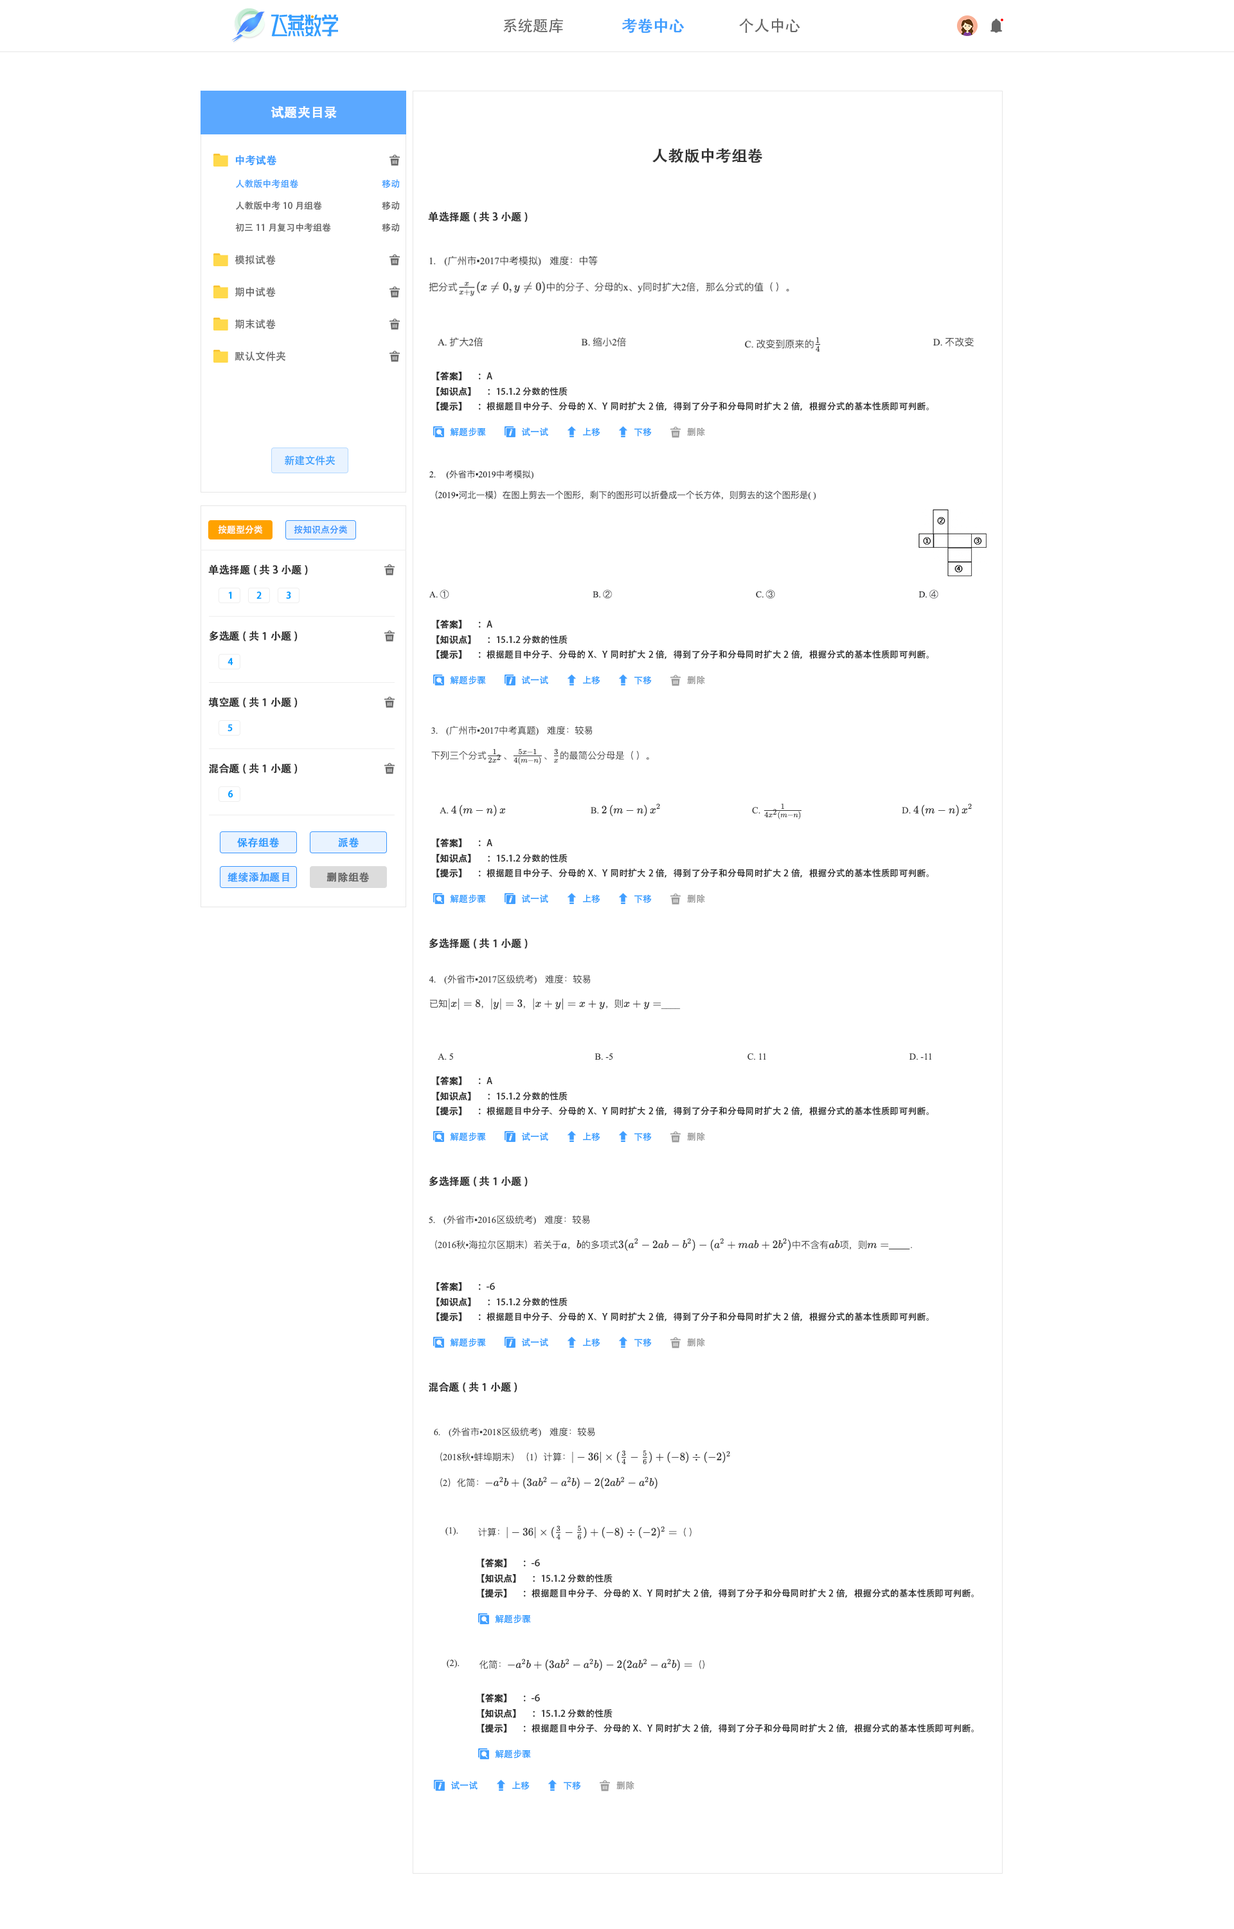
<style>
.page{position:relative;width:1234px;height:1929px;background:#ffffff}
.page>*{position:absolute;margin:0}
.t1{font:15.4px "AdobeHeitiStd-Regular";color:#666666}
.t2{font:15.4px "AdobeHeitiStd-Regular";color:#409eff;font-weight:bold}
.t3{font:12.9px "AdobeHeitiStd-Regular";color:#ffffff;font-weight:bold}
.t4{font:15.4px "AdobeHeitiStd-Regular";color:#333333;font-weight:bold}
.t5{font:10.3px "AdobeHeitiStd-Regular";color:#409eff;font-weight:bold}
.t6{font:9px "AdobeHeitiStd-Regular";color:#409eff}
.t7{font:9px "AdobeHeitiStd-Regular";color:#666666}
.t8{font:10.3px "AdobeHeitiStd-Regular";color:#333333;font-weight:bold}
.t9{font:10.3px "AdobeHeitiStd-Regular";color:#666666}
.t10{font:9px "AdobeHeitiStd-Regular";color:#2e2e2e;font-weight:bold}
.t11{font:9px "AdobeHeitiStd-Regular";color:#2e2e2e}
.t12{font:9px "AdobeHeitiStd-Regular";color:#339dff}
.t13{font:9px "AdobeHeitiStd-Regular";color:#999999}
.t14{font:10.3px "AdobeHeitiStd-Regular";color:#339dff}
.t15{font:9px "AdobeHeitiStd-Regular";color:#ffffff}
.t16{font:9px "AdobeHeitiStd-Regular";color:#3794ff}
.t17{font:9px "AdobeHeitiStd-Regular";color:#049eff;font-weight:bold}
.t18{font:10.3px "AdobeHeitiStd-Regular";color:#339dff;font-weight:bold}
.t19{font:10.3px "AdobeHeitiStd-Regular";color:#666666;font-weight:bold}
</style>
<div class="page">
<p class="t1" style="left:503px;top:19px;width:60px;height:14px">系统题库</p>
<p class="t2" style="left:622px;top:18px;width:63px;height:15px">考卷中心</p>
<p class="t1" style="left:739px;top:18px;width:61px;height:15px">个人中心</p>
<p class="t3" style="left:271px;top:106px;width:66px;height:13px">试题夹目录</p>
<p class="t4" style="left:652px;top:148px;width:110px;height:15px">人教版中考组卷</p>
<p class="t5" style="left:235px;top:155px;width:42px;height:11px">中考试卷</p>
<p class="t6" style="left:236px;top:179px;width:62px;height:9px">人教版中考组卷</p>
<p class="t6" style="left:382px;top:179px;width:18px;height:9px">移动</p>
<p class="t7" style="left:236px;top:201px;width:86px;height:9px">人教版中考10月组卷</p>
<p class="t7" style="left:382px;top:201px;width:18px;height:9px">移动</p>
<p class="t8" style="left:428px;top:212px;width:100px;height:10px">单选择题(共3小题)</p>
<p class="t7" style="left:235px;top:223px;width:96px;height:9px">初三11月复习中考组卷</p>
<p class="t7" style="left:382px;top:223px;width:18px;height:9px">移动</p>
<p class="t9" style="left:235px;top:255px;width:41px;height:10px">模拟试卷</p>
<p class="t9" style="left:235px;top:287px;width:41px;height:10px">期中试卷</p>
<p class="t9" style="left:235px;top:319px;width:41px;height:10px">期末试卷</p>
<p class="t9" style="left:235px;top:351px;width:50px;height:10px">默认文件夹</p>
<p class="t10" style="left:437px;top:372px;width:55px;height:9px">【答案】 <span class="t11">     ：A</span></p>
<p class="t11" style="left:437px;top:387px;width:131px;height:9px"><span class="t10">【知识点】 </span>     ：15.1.2 分数的性质</p>
<p class="t11" style="left:437px;top:401px;width:492px;height:10px"><span class="t10">【提示】 </span>     ：根据题目中分子、分母的X、Y同时扩大2倍，得到了分子和分母同时扩大2倍，根据分式的基本性质即可判断。</p>
<p class="t12" style="left:450px;top:428px;width:36px;height:9px">解题步骤</p>
<p class="t12" style="left:522px;top:428px;width:26px;height:8px">试一试</p>
<p class="t12" style="left:583px;top:428px;width:17px;height:9px">上移</p>
<p class="t12" style="left:634px;top:428px;width:18px;height:9px">下移</p>
<p class="t13" style="left:687px;top:428px;width:18px;height:8px">删除</p>
<p class="t14" style="left:284px;top:455px;width:51px;height:10px">新建文件夹</p>
<p class="t15" style="left:218px;top:525px;width:44px;height:9px">按题型分类</p>
<p class="t16" style="left:294px;top:525px;width:53px;height:9px">按知识点分类</p>
<p class="t8" style="left:208px;top:564px;width:100px;height:11px">单选择题(共3小题)</p>
<p class="t17" style="left:228px;top:591px;width:4px;height:8px">1</p>
<p class="t17" style="left:256px;top:591px;width:6px;height:8px">2</p>
<p class="t17" style="left:286px;top:591px;width:5px;height:8px">3</p>
<p class="t10" style="left:437px;top:620px;width:55px;height:9px">【答案】 <span class="t11">     ：A</span></p>
<p class="t8" style="left:209px;top:631px;width:89px;height:11px">多选题(共1小题)</p>
<p class="t11" style="left:437px;top:635px;width:131px;height:9px"><span class="t10">【知识点】 </span>     ：15.1.2 分数的性质</p>
<p class="t11" style="left:437px;top:649px;width:492px;height:10px"><span class="t10">【提示】 </span>     ：根据题目中分子、分母的X、Y同时扩大2倍，得到了分子和分母同时扩大2倍，根据分式的基本性质即可判断。</p>
<p class="t17" style="left:228px;top:658px;width:5px;height:7px">4</p>
<p class="t12" style="left:450px;top:676px;width:36px;height:9px">解题步骤</p>
<p class="t12" style="left:522px;top:676px;width:26px;height:8px">试一试</p>
<p class="t12" style="left:583px;top:676px;width:17px;height:9px">上移</p>
<p class="t12" style="left:634px;top:676px;width:18px;height:9px">下移</p>
<p class="t13" style="left:687px;top:676px;width:18px;height:8px">删除</p>
<p class="t8" style="left:208px;top:697px;width:90px;height:11px">填空题(共1小题)</p>
<p class="t17" style="left:228px;top:724px;width:5px;height:8px">5</p>
<p class="t8" style="left:209px;top:763px;width:89px;height:11px">混合题(共1小题)</p>
<p class="t17" style="left:228px;top:790px;width:5px;height:8px">6</p>
<p class="t18" style="left:237px;top:837px;width:43px;height:10px">保存组卷</p>
<p class="t18" style="left:338px;top:837px;width:21px;height:10px">派卷</p>
<p class="t10" style="left:437px;top:838px;width:55px;height:9px">【答案】 <span class="t11">     ：A</span></p>
<p class="t11" style="left:437px;top:854px;width:131px;height:9px"><span class="t10">【知识点】 </span>     ：15.1.2 分数的性质</p>
<p class="t11" style="left:437px;top:868px;width:492px;height:10px"><span class="t10">【提示】 </span>     ：根据题目中分子、分母的X、Y同时扩大2倍，得到了分子和分母同时扩大2倍，根据分式的基本性质即可判断。</p>
<p class="t5" style="left:228px;top:872px;width:61px;height:10px">继续添加题目</p>
<p class="t19" style="left:327px;top:872px;width:43px;height:10px">删除组卷</p>
<p class="t12" style="left:450px;top:894px;width:36px;height:9px">解题步骤</p>
<p class="t12" style="left:522px;top:894px;width:26px;height:9px">试一试</p>
<p class="t12" style="left:583px;top:894px;width:17px;height:9px">上移</p>
<p class="t12" style="left:634px;top:894px;width:18px;height:9px">下移</p>
<p class="t13" style="left:687px;top:894px;width:18px;height:9px">删除</p>
<p class="t8" style="left:429px;top:938px;width:99px;height:11px">多选择题(共1小题)</p>
<p class="t10" style="left:437px;top:1076px;width:55px;height:9px">【答案】 <span class="t11">     ：A</span></p>
<p class="t11" style="left:437px;top:1092px;width:131px;height:9px"><span class="t10">【知识点】 </span>     ：15.1.2 分数的性质</p>
<p class="t11" style="left:437px;top:1106px;width:492px;height:9px"><span class="t10">【提示】 </span>     ：根据题目中分子、分母的X、Y同时扩大2倍，得到了分子和分母同时扩大2倍，根据分式的基本性质即可判断。</p>
<p class="t12" style="left:450px;top:1132px;width:36px;height:9px">解题步骤</p>
<p class="t12" style="left:522px;top:1132px;width:26px;height:8px">试一试</p>
<p class="t12" style="left:583px;top:1132px;width:17px;height:9px">上移</p>
<p class="t12" style="left:634px;top:1132px;width:18px;height:9px">下移</p>
<p class="t13" style="left:687px;top:1132px;width:18px;height:8px">删除</p>
<p class="t8" style="left:429px;top:1176px;width:99px;height:11px">多选择题(共1小题)</p>
<p class="t10" style="left:437px;top:1282px;width:58px;height:9px">【答案】 <span class="t11">     ：-6</span></p>
<p class="t11" style="left:437px;top:1297px;width:131px;height:9px"><span class="t10">【知识点】 </span>     ：15.1.2 分数的性质</p>
<p class="t11" style="left:437px;top:1311px;width:492px;height:10px"><span class="t10">【提示】 </span>     ：根据题目中分子、分母的X、Y同时扩大2倍，得到了分子和分母同时扩大2倍，根据分式的基本性质即可判断。</p>
<p class="t12" style="left:450px;top:1338px;width:36px;height:9px">解题步骤</p>
<p class="t12" style="left:522px;top:1338px;width:26px;height:8px">试一试</p>
<p class="t12" style="left:583px;top:1338px;width:17px;height:9px">上移</p>
<p class="t12" style="left:634px;top:1338px;width:18px;height:9px">下移</p>
<p class="t13" style="left:687px;top:1338px;width:18px;height:8px">删除</p>
<p class="t8" style="left:429px;top:1382px;width:89px;height:10px">混合题(共1小题)</p>
<p class="t10" style="left:482px;top:1558px;width:58px;height:9px">【答案】 <span class="t11">     ：-6</span></p>
<p class="t11" style="left:482px;top:1574px;width:131px;height:9px"><span class="t10">【知识点】 </span>     ：15.1.2 分数的性质</p>
<p class="t11" style="left:482px;top:1588px;width:492px;height:10px"><span class="t10">【提示】 </span>     ：根据题目中分子、分母的X、Y同时扩大2倍，得到了分子和分母同时扩大2倍，根据分式的基本性质即可判断。</p>
<p class="t12" style="left:495px;top:1614px;width:36px;height:9px">解题步骤</p>
<p class="t10" style="left:482px;top:1693px;width:58px;height:9px">【答案】 <span class="t11">     ：-6</span></p>
<p class="t11" style="left:482px;top:1709px;width:131px;height:9px"><span class="t10">【知识点】 </span>     ：15.1.2 分数的性质</p>
<p class="t11" style="left:482px;top:1723px;width:492px;height:10px"><span class="t10">【提示】 </span>     ：根据题目中分子、分母的X、Y同时扩大2倍，得到了分子和分母同时扩大2倍，根据分式的基本性质即可判断。</p>
<p class="t12" style="left:495px;top:1749px;width:36px;height:9px">解题步骤</p>
<p class="t12" style="left:451px;top:1781px;width:27px;height:8px">试一试</p>
<p class="t12" style="left:512px;top:1781px;width:18px;height:9px">上移</p>
<p class="t12" style="left:564px;top:1781px;width:17px;height:9px">下移</p>
<p class="t13" style="left:616px;top:1781px;width:18px;height:8px">删除</p>
</div>
